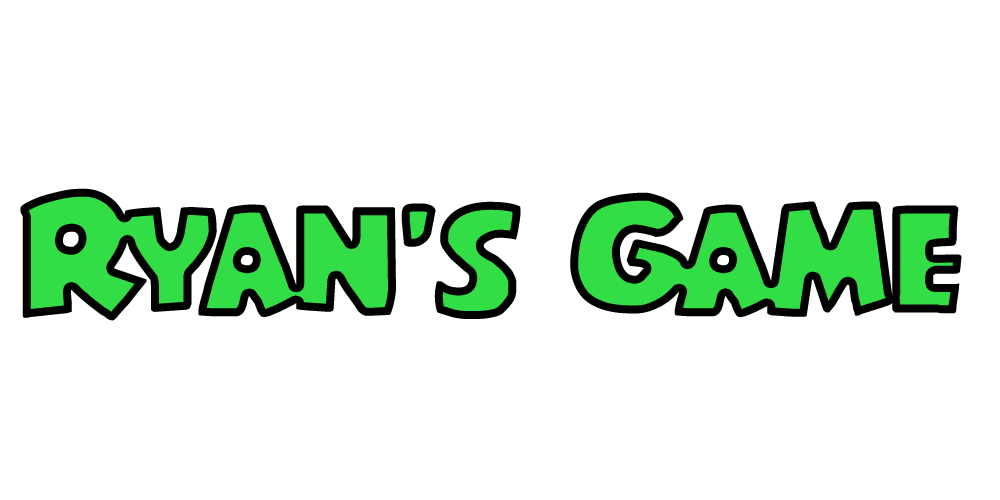
<style>
.page{position:relative;width:1000px;height:500px;background:#ffffff}
.page>*{position:absolute;margin:0}
.t1{font:170px "ShablagooExpanded"}
</style>
<div class="page">
<p class="t1" style="left:20px;top:188px;width:942px;height:133px">Ryan’s Game</p>
</div>
